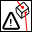
<style>
.page{position:relative;width:32px;height:32px;background:#ffffff}
.page>*{position:absolute;margin:0}
.t1{font:9px "Arial-BoldMT";color:#000000}
</style>
<div class="page">
<p class="t1" style="left:10px;top:19px;width:2px;height:7px">!</p>
</div>
